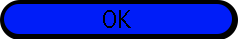
<style>
.page{position:relative;width:238px;height:39px;background:#001df8}
.page>*{position:absolute;margin:0}
.t1{font:25px "LucidaSans-Typewriter";color:#000000}
</style>
<div class="page">
<p class="t1" style="left:103px;top:10px;width:28px;height:18px">OK</p>
</div>
